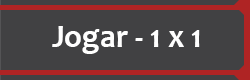
<style>
.page{position:relative;width:250px;height:80px;background:#414143}
.page>*{position:absolute;margin:0}
.t1{font:32.1px "Candara-Bold";color:#ffffff}
</style>
<div class="page">
<p class="t1" style="left:52px;top:26px;width:148px;height:28px">Jogar - 1 x 1</p>
</div>
